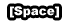
<style>
.page{position:relative;width:70px;height:24px;background:#ffffff}
.page>*{position:absolute;margin:0}
.t1{font:12px "Arial-Black";color:#ffffff}
</style>
<div class="page">
<p class="t1" style="left:10px;top:6px;width:49px;height:12px">[Space]</p>
</div>
